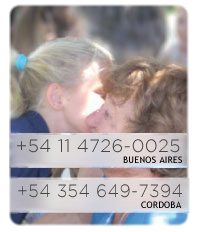
<style>
.page{position:relative;width:199px;height:232px}
.page>*{position:absolute;margin:0}
.t1{font:18px "GothamLight";letter-spacing:0.025em;color:#464545}
.t2{font:9px "TrebuchetMS";letter-spacing:0.025em;color:#000000}
.t3{font:18px "GothamLight";letter-spacing:0.025em;color:#464545;scale:0.96 1}
</style>
<div class="page">
<p class="t1" style="left:17px;top:139px;width:163px;height:14px">+54 11 4726-0025</p>
<p class="t2" style="left:123px;top:156px;width:59px;height:7px">BUENOS AIRES</p>
<p class="t3" style="left:18px;top:184px;width:164px;height:14px">+54 354 649-7394</p>
<p class="t2" style="left:141px;top:201px;width:41px;height:7px">CORDOBA</p>
</div>
